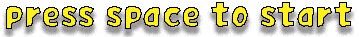
<style>
.page{position:relative;width:359px;height:37px;background:#ffffff}
.page>*{position:absolute;margin:0}
.t1{font:30px "KoreanPKS-R";letter-spacing:0.05em}
</style>
<div class="page">
<p class="t1" style="left:6px;top:2px;width:346px;height:27px">press space to start</p>
</div>
